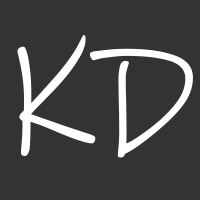
<style>
.page{position:relative;width:200px;height:200px;background:#333333}
.page>*{position:absolute;margin:0}
.t1{font:160px "InkFree";color:#ffffff}
</style>
<div class="page">
<p class="t1" style="left:17px;top:35px;width:176px;height:123px">KD</p>
</div>
